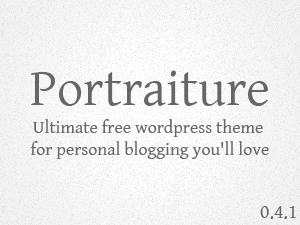
<style>
.page{position:relative;width:300px;height:225px}
.page>*{position:absolute;margin:0}
.t1{font:52px "Gentium";color:#666666}
.t2{font:18px "Gentium";color:#666666}
.t3{font:20px "Gentium";color:#666666}
</style>
<div class="page">
<p class="t1" style="left:31px;top:70px;width:237px;height:36px">Portraiture</p>
<p class="t2" style="left:30px;top:119px;width:239px;height:40px;text-align:center">Ultimate free wordpress theme <br>for personal blogging you'll love</p>
<p class="t3" style="left:260px;top:206px;width:37px;height:13px">0.4.1</p>
</div>
